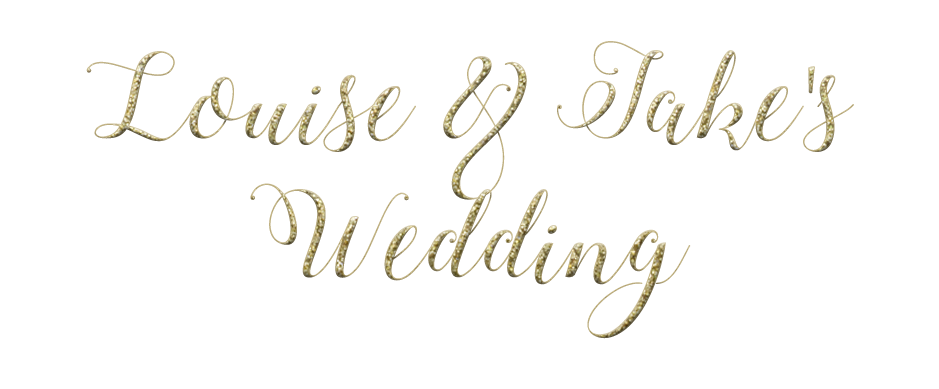
<style>
.page{position:relative;width:939px;height:389px;background:#ffffff}
.page>*{position:absolute;margin:0}
.t1{font:116px "StylishCalligraphyDemo"}
</style>
<div class="page">
<p class="t1" style="left:86px;top:41px;width:768px;height:298px;text-align:center">Louise &amp; Jake's Wedding</p>
</div>
